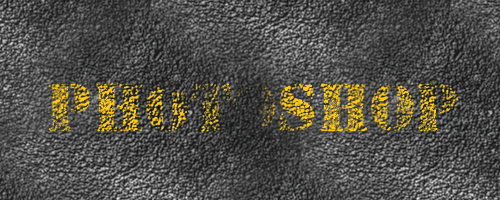
<style>
.page{position:relative;width:500px;height:200px}
.page>*{position:absolute;margin:0}
.t1{font:63.1px "StampPlain"}
</style>
<div class="page">
<p class="t1" style="left:49px;top:84px;width:409px;height:47px">PHOTOSHOP</p>
</div>
